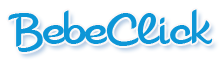
<style>
.page{position:relative;width:220px;height:60px;background:#ffffff}
.page>*{position:absolute;margin:0}
.t1{font:44.2px "Sahara";letter-spacing:-0.04em;color:#0d96d7}
</style>
<div class="page">
<p class="t1" style="left:8px;top:9px;width:205px;height:43px">BebeClick</p>
</div>
